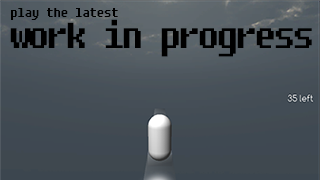
<style>
.page{position:relative;width:320px;height:180px}
.page>*{position:absolute;margin:0}
.t1{font:14px "Fixedsys";letter-spacing:-0.1em;color:#000000}
.t2{font:36px "Fixedsys";letter-spacing:-0.1em;color:#000000}
</style>
<div class="page">
<p class="t1" style="left:11px;top:8px;width:107px;height:12px">play the latest</p>
<p class="t2" style="left:10px;top:19px;width:302px;height:38px">work in progress</p>
</div>
